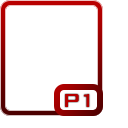
<style>
.page{position:relative;width:128px;height:128px;background:#ffffff}
.page>*{position:absolute;margin:0}
.t1{font:24.2px "BankGothicBT-Medium";letter-spacing:-0.08em;color:#b70000}
</style>
<div class="page">
<p class="t1" style="left:65px;top:94px;width:25px;height:13px">P1</p>
</div>
